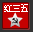
<style>
.page{position:relative;width:33px;height:32px;background:#c50000}
.page>*{position:absolute;margin:0}
.t1{font:10.4px "SimSun";letter-spacing:-0.25em;color:#ffffff}
</style>
<div class="page">
<p class="t1" style="left:4px;top:4px;width:24px;height:8px">红三五</p>
</div>
